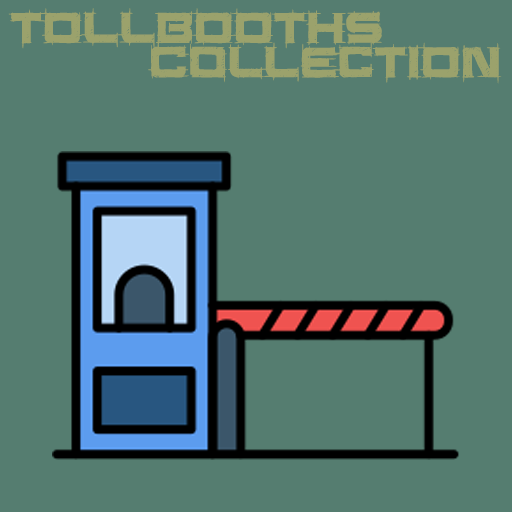
<style>
.page{position:relative;width:512px;height:512px;background:#557d70}
.page>*{position:absolute;margin:0}
.t1{font:50px "SaucerBB";color:#9ba26c}
</style>
<div class="page">
<p class="t1" style="left:8px;top:8px;width:374px;height:41px">TOLLBOOTHS</p>
<p class="t1" style="left:148px;top:42px;width:354px;height:42px">colLECTION</p>
</div>
